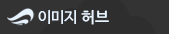
<style>
.page{position:relative;width:169px;height:34px;background:#333333}
.page>*{position:absolute;margin:0}
.t1{font:15px "NanumBarunGothicOTF";color:#e7f4ff}
.t2{font:15px "NanumGothicOTFBold";color:#e7f4ff}
</style>
<div class="page">
<p class="t1" style="left:38px;top:10px;width:71px;height:15px">이미지 <span class="t2">허브</span></p>
</div>
